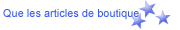
<style>
.page{position:relative;width:180px;height:30px;background:#ffffff}
.page>*{position:absolute;margin:0}
.t1{font:11px "ArialMT";color:#3657f7}
</style>
<div class="page">
<p class="t1" style="left:3px;top:9px;width:136px;height:11px">Que les articles de boutique</p>
</div>
